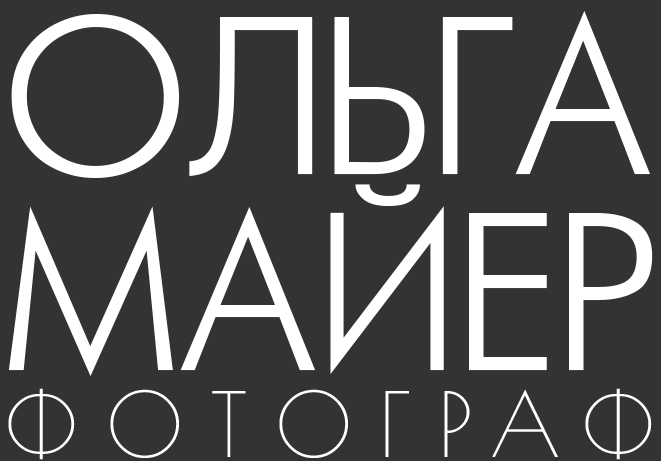
<style>
.page{position:relative;width:661px;height:461px;background:#333333}
.page>*{position:absolute;margin:0}
.t1{font:245px "FuturaLightLight";letter-spacing:-0.017em;color:#ffffff}
.t2{font:245px "FuturaLightLight";letter-spacing:0.009em;color:#ffffff}
.t3{font:88px "PoiretOne-Regular";letter-spacing:0.307em;color:#ffffff}
</style>
<div class="page">
<p class="t1" style="left:11px;top:11px;width:639px;height:167px">ОЛЬГА</p>
<p class="t2" style="left:8px;top:184px;width:645px;height:192px">МАЙЕР</p>
<p class="t3" style="left:8px;top:388px;width:644px;height:72px">ФОТОГРАФ</p>
</div>
